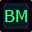
<style>
.page{position:relative;width:32px;height:32px;background:#08000b}
.page>*{position:absolute;margin:0}
.t1{font:16px "MSReferenceSansSerif";color:#3aff92}
</style>
<div class="page">
<p class="t1" style="left:5px;top:10px;width:22px;height:12px">BM</p>
</div>
